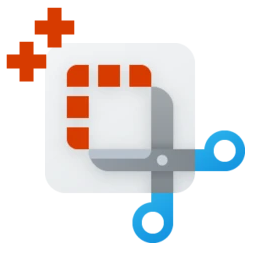
<style>
.page{position:relative;width:256px;height:256px;background:#ffffff}
.page>*{position:absolute;margin:0}
.t1{font:71.7px "DelaGothicOne-Regular";color:#d73b00}
</style>
<div class="page">
<p class="t1" style="left:34px;top:7px;width:41px;height:41px">+</p>
<p class="t1" style="left:6px;top:41px;width:41px;height:41px">+</p>
</div>
